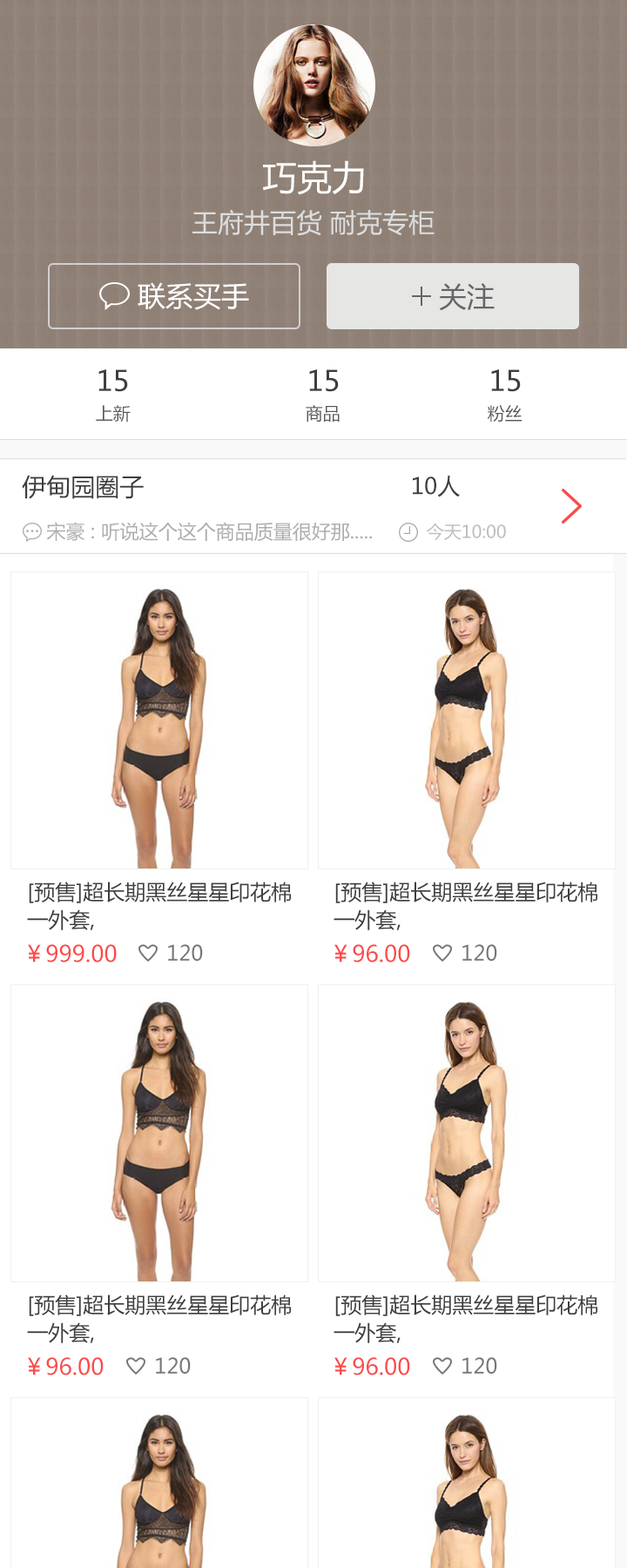
<style>
.page{position:relative;width:627px;height:1568px;background:#ffffff}
.page>*{position:absolute;margin:0}
.t1{font:34.8px "MicrosoftYaHei";color:#fdfdfd}
.t2{font:26.1px "MicrosoftYaHei";color:#dddddd}
.t3{font:27.9px "MicrosoftYaHei";color:#ffffff}
.t4{font:27.9px "MicrosoftYaHei";color:#676566}
.t5{font:27.9px "MicrosoftYaHei";color:#3e3e3e}
.t6{font:17.4px "MicrosoftYaHei";color:#585858}
.t7{font:24.4px "MicrosoftYaHei";color:#3e3e3e}
.t8{font:22.6px "MicrosoftYaHei";color:#3e3e3e}
.t9{font:19.2px "MicrosoftYaHei";color:#adadad}
.t10{font:17.4px "MicrosoftYaHei";color:#bebebe}
.t11{font:20.9px/27.9px "MicrosoftYaHei";color:#3e3e3e}
.t12{font:22.6px "MicrosoftYaHei";color:#fc4a4a}
.t13{font:20.9px "MicrosoftYaHei";color:#777777}
</style>
<div class="page">
<p class="t1" style="left:262px;top:160px;width:102px;height:35px">巧克力</p>
<p class="t2" style="left:193px;top:209px;width:242px;height:27px">王府井百货 耐克专柜</p>
<p class="t3" style="left:138px;top:282px;width:111px;height:28px">联系买手</p>
<p class="t4" style="left:439px;top:283px;width:56px;height:28px">关注</p>
<p class="t5" style="left:98px;top:369px;width:30px;height:23px">15</p>
<p class="t5" style="left:309px;top:369px;width:30px;height:23px">15</p>
<p class="t5" style="left:491px;top:369px;width:30px;height:23px">15</p>
<p class="t6" style="left:96px;top:405px;width:35px;height:17px">上新</p>
<p class="t6" style="left:306px;top:405px;width:34px;height:17px">商品</p>
<p class="t6" style="left:488px;top:405px;width:35px;height:17px">粉丝</p>
<p class="t7" style="left:22px;top:475px;width:122px;height:24px">伊甸园圈子</p>
<p class="t8" style="left:413px;top:476px;width:47px;height:21px">10人</p>
<p class="t9" style="left:46px;top:522px;width:326px;height:19px">宋豪 : 听说这个这个商品质量很好那.....</p>
<p class="t10" style="left:427px;top:524px;width:79px;height:17px">今天10:00</p>
<p class="t11" style="left:27px;top:882px;width:264px;height:48px">[预售]超长期黑丝星星印花棉<br>一外套,</p>
<p class="t11" style="left:334px;top:882px;width:264px;height:48px">[预售]超长期黑丝星星印花棉<br>一外套,</p>
<p class="t12" style="left:28px;top:944px;width:89px;height:19px">￥999.00</p>
<p class="t13" style="left:168px;top:944px;width:35px;height:17px">120</p>
<p class="t12" style="left:335px;top:944px;width:75px;height:19px">￥96.00</p>
<p class="t13" style="left:463px;top:944px;width:34px;height:17px">120</p>
<p class="t11" style="left:27px;top:1294px;width:264px;height:49px">[预售]超长期黑丝星星印花棉<br>一外套,</p>
<p class="t11" style="left:334px;top:1294px;width:264px;height:49px">[预售]超长期黑丝星星印花棉<br>一外套,</p>
<p class="t12" style="left:28px;top:1357px;width:76px;height:18px">￥96.00</p>
<p class="t13" style="left:156px;top:1357px;width:35px;height:17px">120</p>
<p class="t12" style="left:335px;top:1357px;width:75px;height:18px">￥96.00</p>
<p class="t13" style="left:463px;top:1357px;width:34px;height:17px">120</p>
</div>
